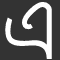
<style>
.page{position:relative;width:60px;height:60px;background:#333333}
.page>*{position:absolute;margin:0}
.t1{font:100px "FreeSans";color:#ffffff}
</style>
<div class="page">
<p class="t1" style="left:5px;top:1px;width:47px;height:58px">এ</p>
</div>
